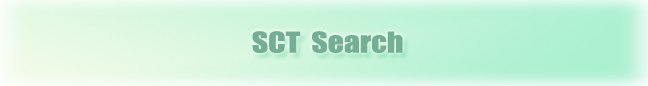
<style>
.page{position:relative;width:648px;height:86px}
.page>*{position:absolute;margin:0}
.t1{font:26.4px "Impact";color:#73af95;scale:1.2 1}
</style>
<div class="page">
<p class="t1" style="left:252px;top:31px;width:151px;height:22px">SCT  Search</p>
</div>
